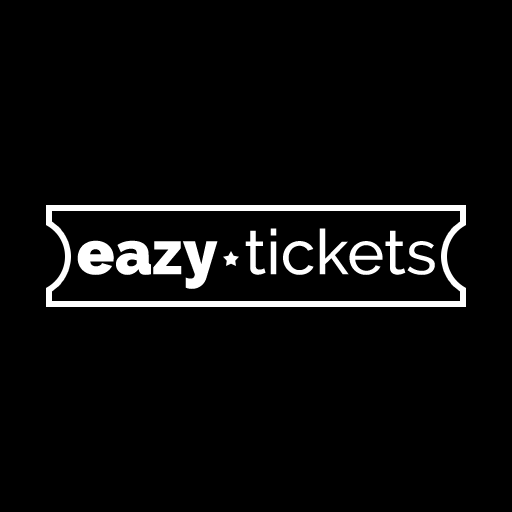
<style>
.page{position:relative;width:512px;height:512px;background:#000000}
.page>*{position:absolute;margin:0}
.t1{font:62.5px "Raleway-Medium";color:#ffffff}
.t2{font:62.5px "Raleway-Black";color:#ffffff}
</style>
<div class="page">
<p class="t1" style="left:77px;top:228px;width:358px;height:61px"><span class="t2">eazy  </span>tickets</p>
</div>
